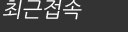
<style>
.page{position:relative;width:128px;height:32px;background:#333333}
.page>*{position:absolute;margin:0}
.t1{font:21px "NanumGothic";color:#ffffff;font-style:italic}
</style>
<div class="page">
<p class="t1" style="left:3px;top:0px;width:79px;height:20px">최근접속</p>
</div>
